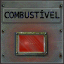
<style>
.page{position:relative;width:64px;height:64px}
.page>*{position:absolute;margin:0}
.t1{font:10px "LucidaConsole";letter-spacing:-0.04em;font-weight:bold;scale:0.86 1}
</style>
<div class="page">
<p class="t1" style="left:4px;top:10px;width:56px;height:9px">COMBUSTÍVEL</p>
</div>
